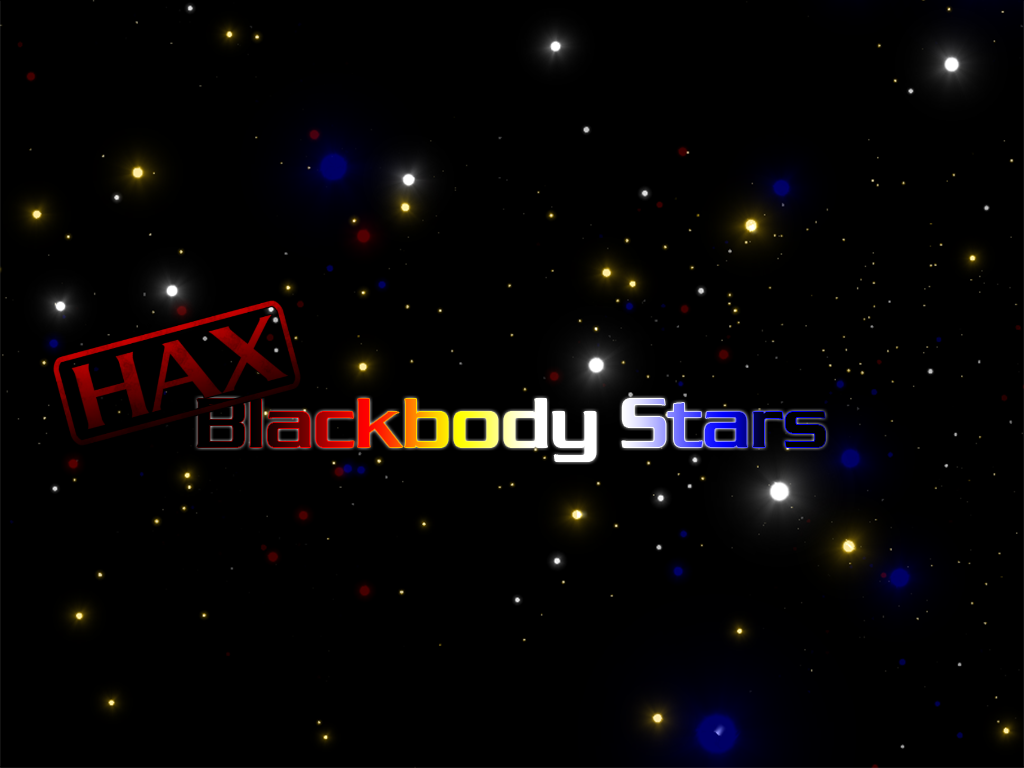
<style>
.page{position:relative;width:1024px;height:768px;background:#000000}
.page>*{position:absolute;margin:0}
.t1{font:72px "Dungeon-Regular"}
</style>
<div class="page">
<p class="t1" style="left:197px;top:399px;width:629px;height:62px">Blackbody Stars</p>
</div>
